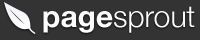
<style>
.page{position:relative;width:200px;height:40px;background:#333333}
.page>*{position:absolute;margin:0}
.t1{font:30px "HelveticaNeue-Light";color:#fbfbfe}
.t2{font:30px "HelveticaNeue-Bold";color:#fbfbfe}
</style>
<div class="page">
<p class="t1" style="left:43px;top:6px;width:152px;height:27px"><span class="t2">page</span>sprout</p>
</div>
